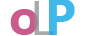
<style>
.page{position:relative;width:86px;height:36px;background:#ffffff}
.page>*{position:absolute;margin:0}
.t1{font:50px "MyriadPro-Regular";color:#a7a9ab}
.t2{font:50px "MyanmarText-Bold";color:#40b8ea}
.t3{font:50px "MyanmarText-Bold";color:#c95c8d}
</style>
<div class="page">
<p class="t1" style="left:34px;top:1px;width:20px;height:34px">L</p>
<p class="t2" style="left:49px;top:0px;width:26px;height:35px">P</p>
<p class="t3" style="left:10px;top:9px;width:28px;height:26px">o</p>
</div>
